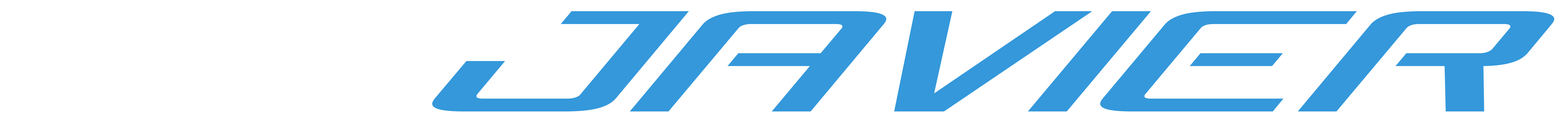
<style>
.page{position:relative;width:1568px;height:124px;background:#ffffff}
.page>*{position:absolute;margin:0}
.t1{font:185.8px "ConcielianBreakExpandedItalic";color:#3498db}
.t2{font:185.8px "ConcielianBreakExpandedItalic";color:#ffffff}
</style>
<div class="page">
<p class="t1" style="left:17px;top:11px;width:1537px;height:100px"><span class="t2">KC</span>JAVIER</p>
</div>
